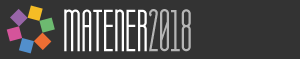
<style>
.page{position:relative;width:300px;height:59px;background:#333333}
.page>*{position:absolute;margin:0}
.t1{font:56.9px "Komoda-Regular";color:#ffffff}
.t2{font:56.9px "Komoda-Regular";color:#b5b5b5}
</style>
<div class="page">
<p class="t1" style="left:64px;top:9px;width:127px;height:43px">maTENER<span class="t2">2018</span></p>
</div>
